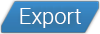
<style>
.page{position:relative;width:100px;height:34px}
.page>*{position:absolute;margin:0}
.t1{font:22px "Roboto-Light";color:#ffffff}
</style>
<div class="page">
<p class="t1" style="left:20px;top:8px;width:61px;height:20px">Export</p>
</div>
